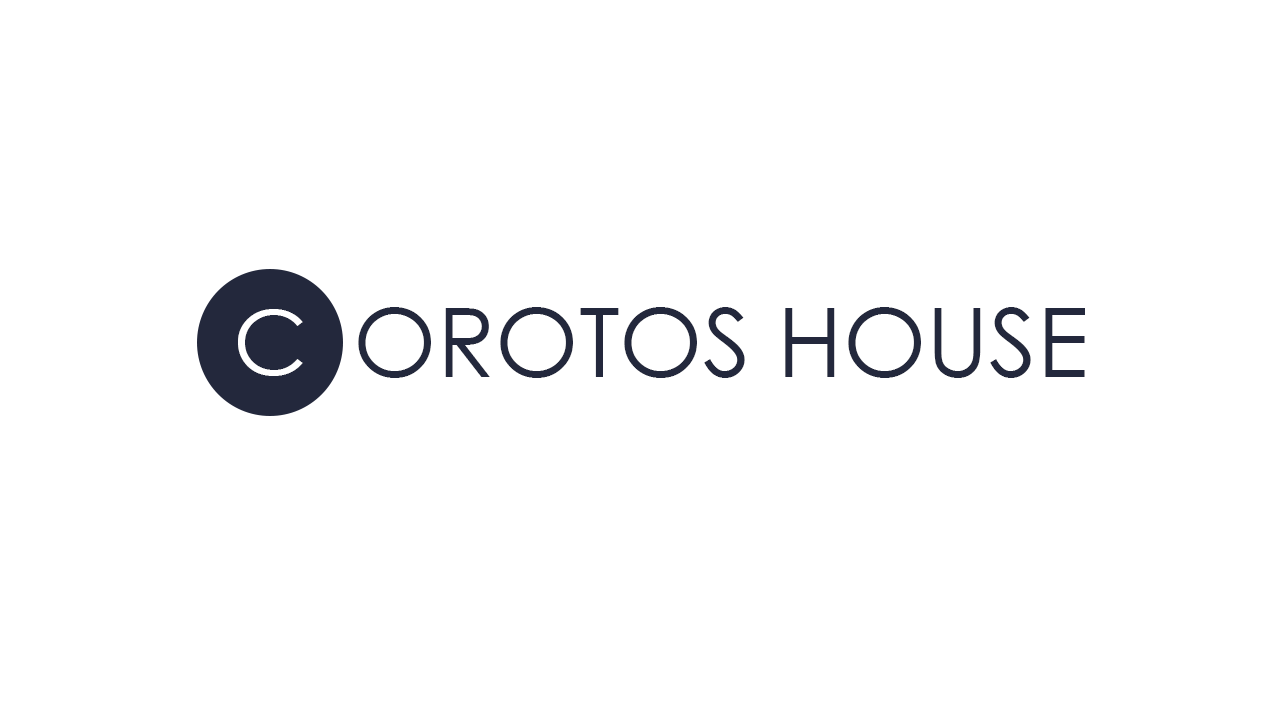
<style>
.page{position:relative;width:1280px;height:720px;background:#ffffff}
.page>*{position:absolute;margin:0}
.t1{font:91.3px "CenturyGothic";color:#ffffff}
.t2{font:96px "CenturyGothic";color:#23283c}
</style>
<div class="page">
<p class="t1" style="left:238px;top:309px;width:65px;height:67px">C</p>
<p class="t2" style="left:358px;top:307px;width:727px;height:71px">OROTOS HOUSE</p>
</div>
